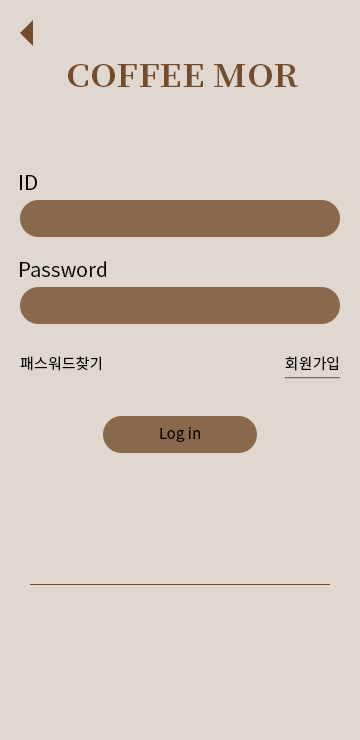
<style>
.page{position:relative;width:360px;height:740px;background:#e0d8d0}
.page>*{position:absolute;margin:0}
.t1{font:30px "NotoSerifKR-Bold";color:#734c2b;scale:1.13 1}
.t2{font:20px "NotoSansKR-Regular";color:#000000}
.t3{font:15px "NotoSansKR-Regular";color:#000000}
.t4{font:15px "NotoSansKR-Regular";color:#000000;text-decoration:underline}
</style>
<div class="page">
<p class="t1" style="left:68px;top:64px;width:230px;height:23px">COFFEE MOR</p>
<p class="t2" style="left:20px;top:175px;width:17px;height:15px">ID</p>
<p class="t2" style="left:20px;top:261px;width:86px;height:16px">Password</p>
<p class="t3" style="left:20px;top:356px;width:81px;height:15px">패스워드찾기</p>
<p class="t4" style="left:284px;top:356px;width:57px;height:23px">회원가입</p>
<p class="t3" style="left:160px;top:427px;width:40px;height:15px">Log in</p>
</div>
